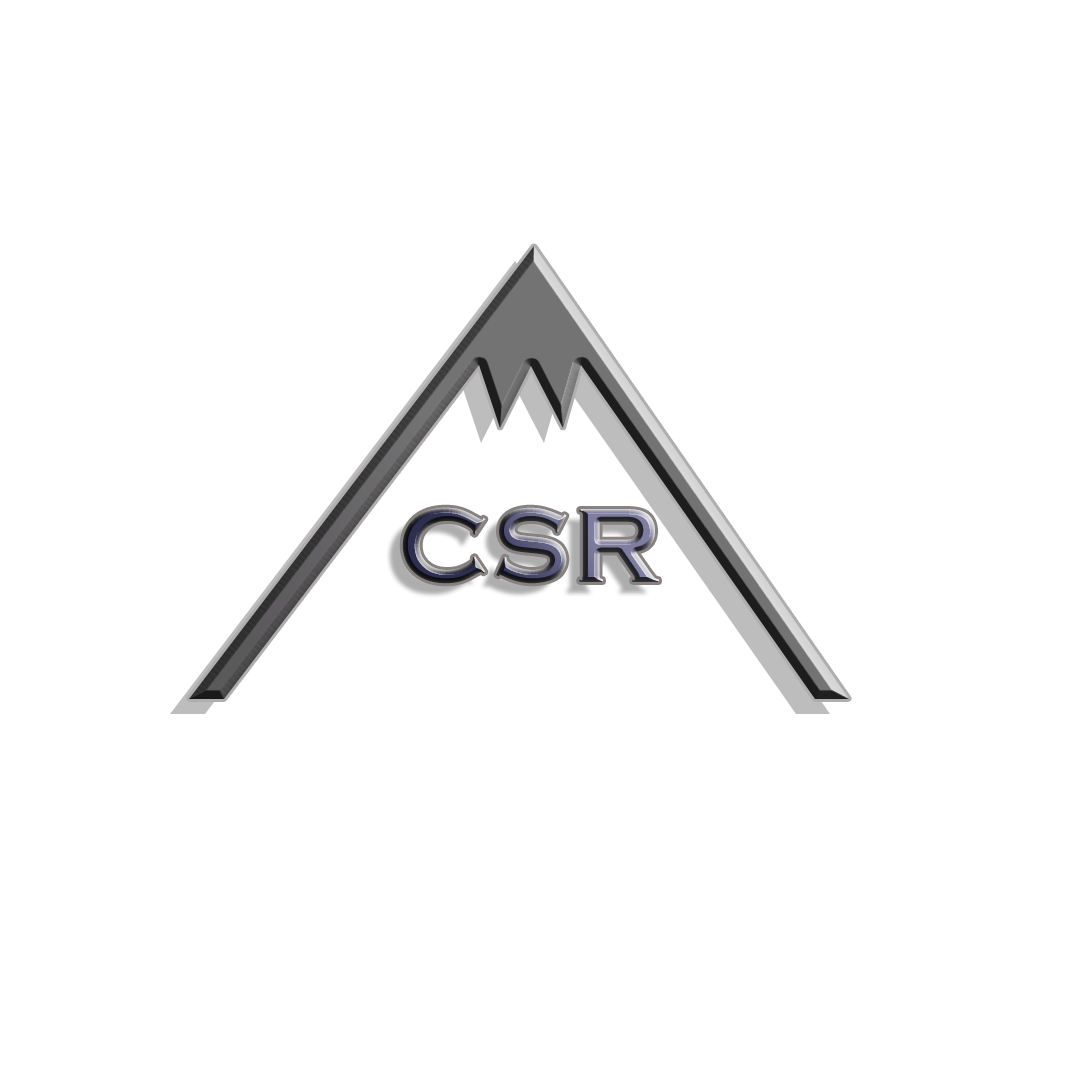
<style>
.page{position:relative;width:1080px;height:1080px;background:#ffffff}
.page>*{position:absolute;margin:0}
.t1{font:108px "CopperplateGothic-Bold";font-weight:bold}
</style>
<div class="page">
<p class="t1" style="left:402px;top:507px;width:257px;height:77px">CSR</p>
</div>
